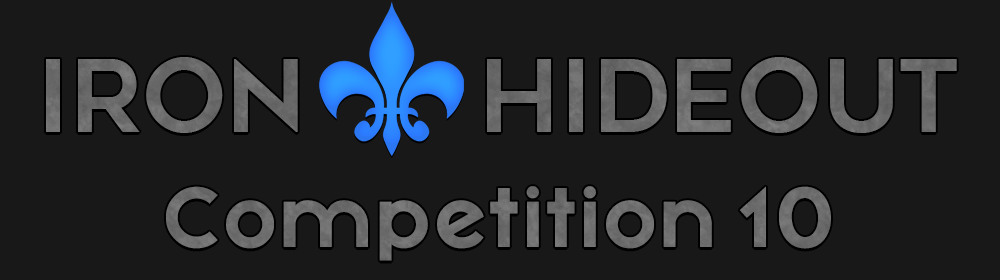
<style>
.page{position:relative;width:1000px;height:280px;background:#181818}
.page>*{position:absolute;margin:0}
.t1{font:100px "Geometos";color:#696969}
.t2{font:83.3px "MayekaBold";color:#6c6c6c}
</style>
<div class="page">
<p class="t1" style="left:46px;top:57px;width:911px;height:76px">Iron       Hideout</p>
<p class="t2" style="left:166px;top:186px;width:665px;height:75px">Competition 10</p>
</div>
